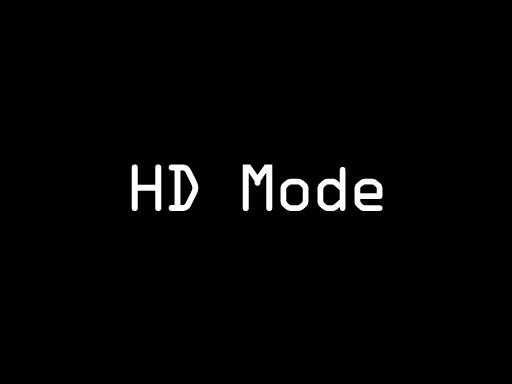
<style>
.page{position:relative;width:512px;height:384px;background:#000000}
.page>*{position:absolute;margin:0}
.t1{font:59.8px "OCRAStd";letter-spacing:-0.1em;color:#ffffff}
</style>
<div class="page">
<p class="t1" style="left:131px;top:164px;width:252px;height:47px">HD Mode</p>
</div>
